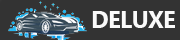
<style>
.page{position:relative;width:180px;height:40px;background:#333333}
.page>*{position:absolute;margin:0}
.t1{font:24px "LeelawadeeUI-Bold";letter-spacing:-0.025em;color:#fafafa}
</style>
<div class="page">
<p class="t1" style="left:92px;top:11px;width:83px;height:17px">DELUXE</p>
</div>
